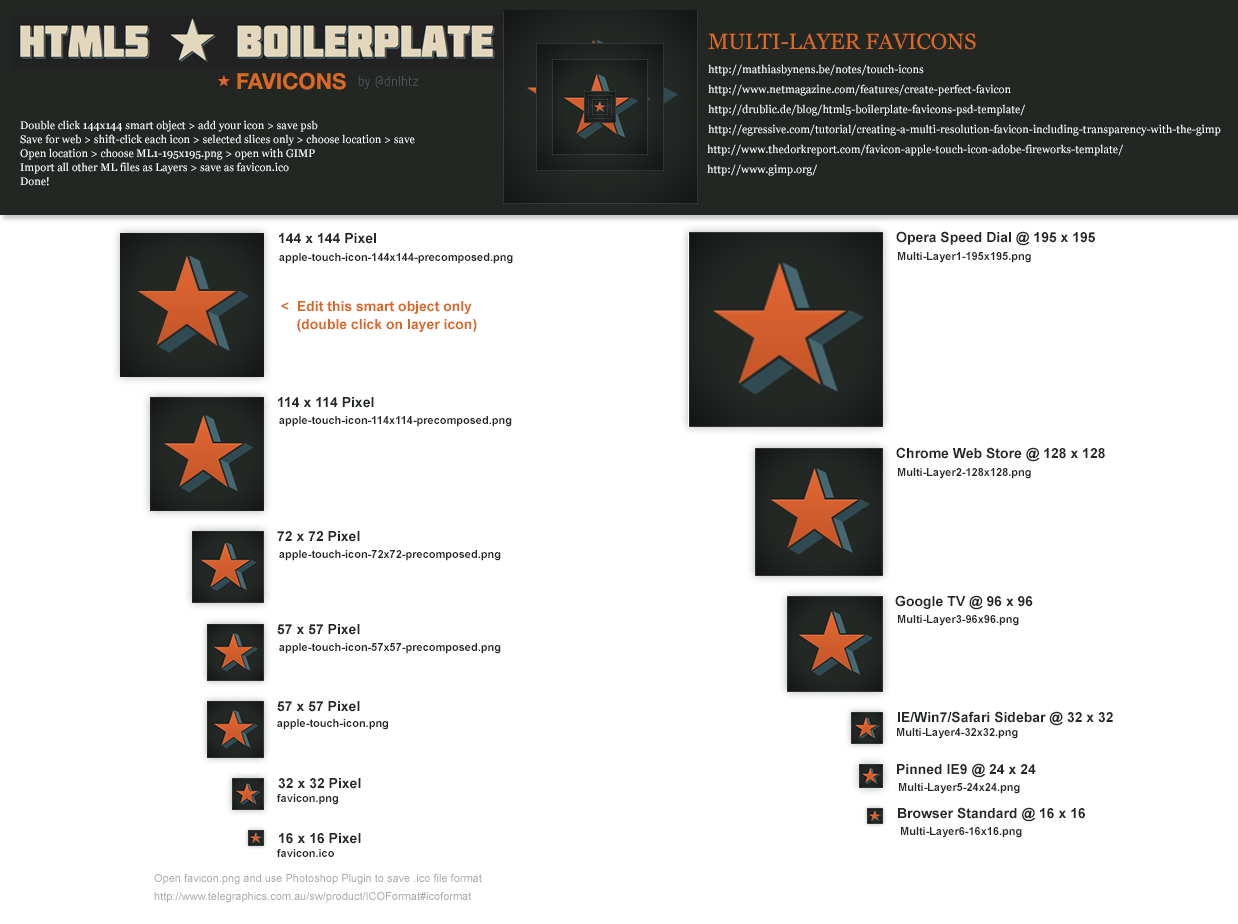
<style>
.page{position:relative;width:1238px;height:924px;background:#ffffff}
.page>*{position:absolute;margin:0}
.t1{font:22px "Georgia";color:#da6926}
.t2{font:11px "Georgia";color:#ffffff}
.t3{font:22px "HelveticaNeue-Bold";color:#da6926}
.t4{font:11px/14px "Georgia";color:#ffffff}
.t5{font:14px "Arial-BoldMT";color:#242927}
.t6{font:11px "Arial-BoldMT";color:#242927}
.t7{font:14px/14px "Arial-BoldMT";color:#da6926}
.t8{font:14px/18px "Arial-BoldMT";color:#da6926}
.t9{font:11px/18px "ArialMT";color:#a9aaaa}
</style>
<div class="page">
<p class="t1" style="left:708px;top:33px;width:268px;height:17px">MULTI-LAYER FAVICONS</p>
<p class="t2" style="left:708px;top:64px;width:216px;height:12px">http://mathiasbynens.be/notes/touch-icons</p>
<p class="t3" style="left:237px;top:72px;width:109px;height:18px">FAVICONS</p>
<p class="t2" style="left:708px;top:84px;width:303px;height:12px">http://www.netmagazine.com/features/create-perfect-favicon</p>
<p class="t2" style="left:708px;top:104px;width:317px;height:12px">http://drublic.de/blog/html5-boilerplate-favicons-psd-template/</p>
<p class="t4" style="left:20px;top:120px;width:395px;height:66px">Double click 144x144 smart object &gt; add your icon &gt; save psb<br>Save for web &gt; shift-click each icon &gt; selected slices only &gt; choose location &gt; save<br>Open location &gt; choose ML1-195x195.png &gt; open with GIMP<br>Import all other ML files as Layers &gt; save as favicon.ico<br>Done!</p>
<p class="t2" style="left:708px;top:124px;width:513px;height:12px">http://egressive.com/tutorial/creating-a-multi-resolution-favicon-including-transparency-with-the-gimp</p>
<p class="t2" style="left:707px;top:144px;width:416px;height:12px">http://www.thedorkreport.com/favicon-apple-touch-icon-adobe-fireworks-template/</p>
<p class="t2" style="left:707px;top:164px;width:110px;height:12px">http://www.gimp.org/</p>
<p class="t5" style="left:279px;top:233px;width:97px;height:11px">144 x 144 Pixel</p>
<p class="t5" style="left:896px;top:231px;width:199px;height:15px">Opera Speed Dial @ 195 x 195</p>
<p class="t6" style="left:279px;top:253px;width:234px;height:11px">apple-touch-icon-144x144-precomposed.png</p>
<p class="t6" style="left:898px;top:252px;width:133px;height:11px">Multi-Layer1-195x195.png</p>
<p class="t7" style="left:281px;top:301px;width:196px;height:31px">&lt;  Edit this smart object only<br><span class="t8">    (double click on layer icon)</span></p>
<p class="t5" style="left:278px;top:397px;width:96px;height:11px">114 x 114 Pixel</p>
<p class="t6" style="left:279px;top:416px;width:233px;height:11px">apple-touch-icon-114x114-precomposed.png</p>
<p class="t5" style="left:896px;top:447px;width:209px;height:15px">Chrome Web Store @ 128 x 128</p>
<p class="t6" style="left:898px;top:468px;width:133px;height:11px">Multi-Layer2-128x128.png</p>
<p class="t5" style="left:277px;top:531px;width:83px;height:11px">72 x 72 Pixel</p>
<p class="t6" style="left:279px;top:550px;width:222px;height:11px">apple-touch-icon-72x72-precomposed.png</p>
<p class="t5" style="left:895px;top:595px;width:138px;height:15px">Google TV @ 96 x 96</p>
<p class="t6" style="left:898px;top:615px;width:121px;height:11px">Multi-Layer3-96x96.png</p>
<p class="t5" style="left:277px;top:624px;width:83px;height:11px">57 x 57 Pixel</p>
<p class="t6" style="left:279px;top:643px;width:222px;height:11px">apple-touch-icon-57x57-precomposed.png</p>
<p class="t5" style="left:277px;top:701px;width:83px;height:11px">57 x 57 Pixel</p>
<p class="t5" style="left:898px;top:711px;width:215px;height:15px">IE/Win7/Safari Sidebar @ 32 x 32</p>
<p class="t6" style="left:277px;top:719px;width:111px;height:11px">apple-touch-icon.png</p>
<p class="t6" style="left:897px;top:728px;width:121px;height:11px">Multi-Layer4-32x32.png</p>
<p class="t5" style="left:897px;top:763px;width:139px;height:15px">Pinned IE9 @ 24 x 24</p>
<p class="t5" style="left:278px;top:778px;width:83px;height:11px">32 x 32 Pixel</p>
<p class="t6" style="left:899px;top:783px;width:121px;height:11px">Multi-Layer5-24x24.png</p>
<p class="t6" style="left:277px;top:794px;width:61px;height:11px">favicon.png</p>
<p class="t5" style="left:898px;top:807px;width:187px;height:15px">Browser Standard @ 16 x 16</p>
<p class="t5" style="left:279px;top:833px;width:82px;height:11px">16 x 16 Pixel</p>
<p class="t6" style="left:901px;top:827px;width:121px;height:11px">Multi-Layer6-16x16.png</p>
<p class="t6" style="left:277px;top:849px;width:57px;height:8px">favicon.ico</p>
<p class="t9" style="left:154px;top:874px;width:328px;height:29px">Open favicon.png and use Photoshop Plugin to save .ico file format<br>http://www.telegraphics.com.au/sw/product/ICOFormat#icoformat</p>
</div>
